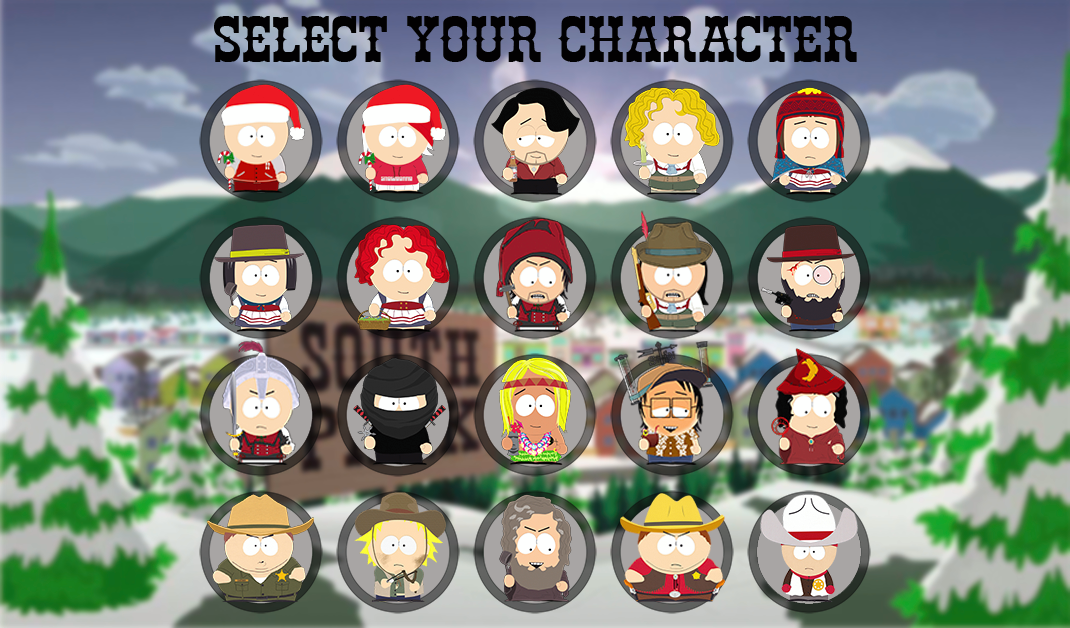
<style>
.page{position:relative;width:1070px;height:628px}
.page>*{position:absolute;margin:0}
.t1{font:72px "Cibola";color:#020102}
</style>
<div class="page">
<p class="t1" style="left:214px;top:16px;width:643px;height:46px">select your character</p>
</div>
